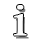
<style>
.page{position:relative;width:40px;height:40px;background:#ffffff}
.page>*{position:absolute;margin:0}
.t1{font:43.5px "BookAntiqua";letter-spacing:-0.075em;color:#fcfcfc;font-weight:bold}
</style>
<div class="page">
<p class="t1" style="left:14px;top:5px;width:13px;height:31px">i</p>
</div>
